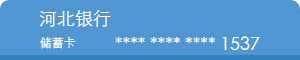
<style>
.page{position:relative;width:300px;height:60px;background:#5096d2}
.page>*{position:absolute;margin:0}
.t1{font:18px "STHeitiSC-Light";color:#ffffff}
.t2{font:12px "STHeitiSC-Light";color:#ffffff}
</style>
<div class="page">
<p class="t1" style="left:39px;top:10px;width:72px;height:17px">河北银行</p>
<p class="t2" style="left:40px;top:37px;width:36px;height:12px">储蓄卡</p>
<p class="t1" style="left:115px;top:36px;width:145px;height:14px">**** **** **** 1537</p>
</div>
